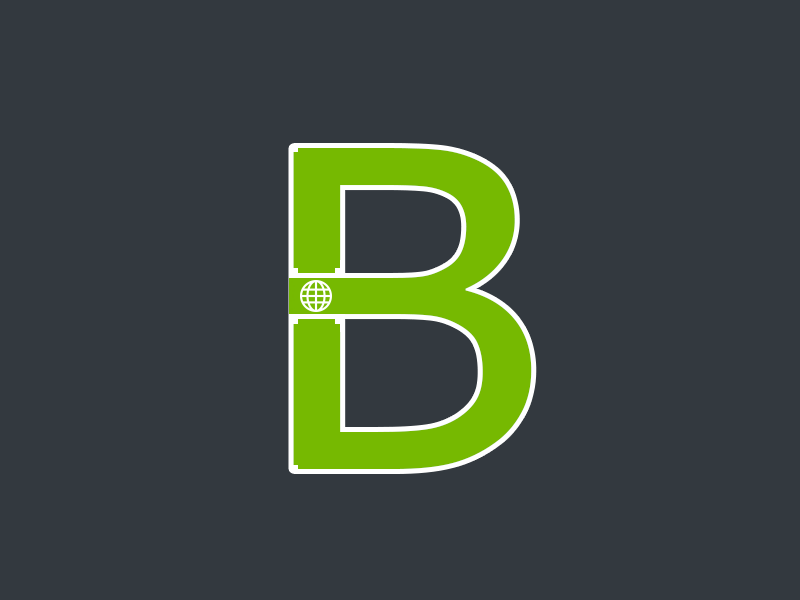
<style>
.page{position:relative;width:800px;height:600px;background:#33393f}
.page>*{position:absolute;margin:0}
.t1{font:440.8px "Tahoma";color:#76b901;scale:1.09 1}
</style>
<div class="page">
<p class="t1" style="left:293px;top:148px;width:239px;height:321px">B</p>
</div>
